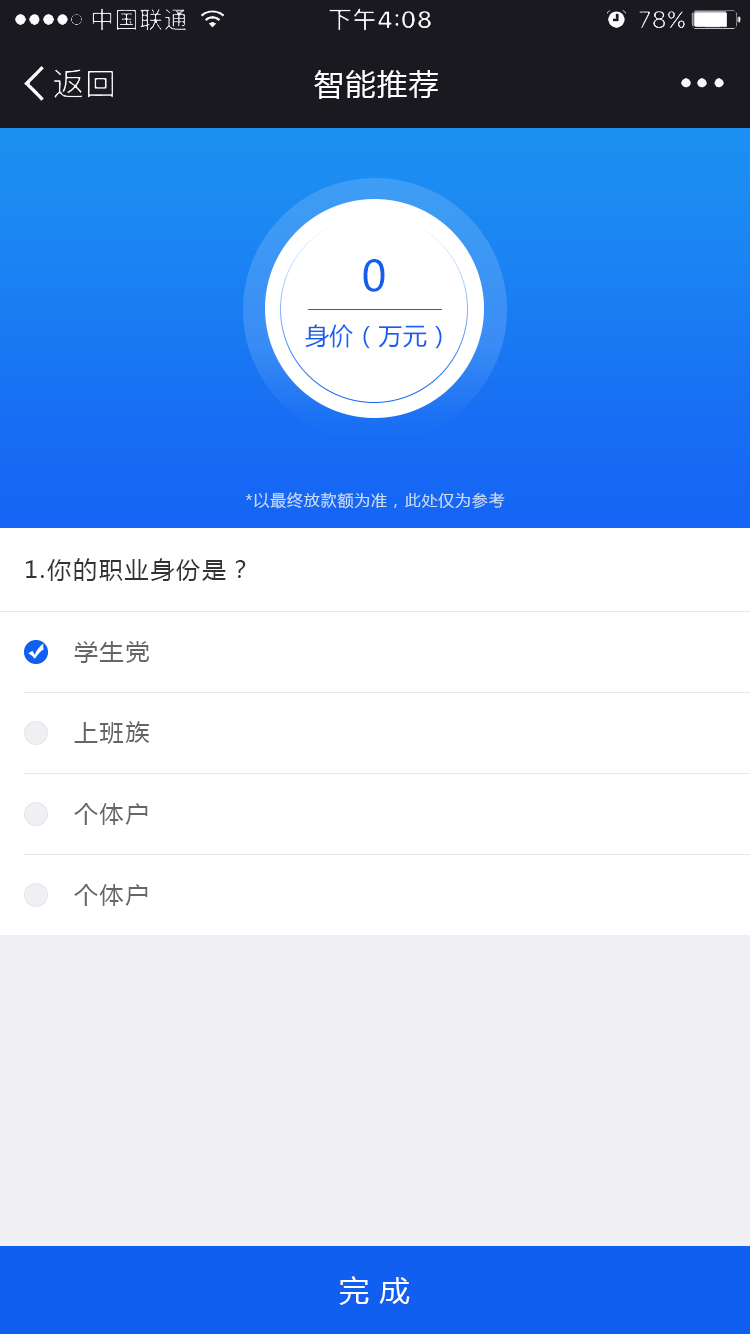
<style>
.page{position:relative;width:750px;height:1334px;background:#ffffff}
.page>*{position:absolute;margin:0}
.t1{font:30px "MicrosoftYaHei";letter-spacing:0.05em;color:#fffefe}
.t2{font:42px "MicrosoftYaHei";letter-spacing:0.06em;color:#105ff1}
.t3{font:24px "MicrosoftYaHei";letter-spacing:0.02em;color:#105ff1}
.t4{font:16px "MicrosoftYaHei";letter-spacing:0.05em;color:#c7ddf3}
.t5{font:24px "MicrosoftYaHei";letter-spacing:0.075em;color:#333333}
.t6{font:24px "MicrosoftYaHei";letter-spacing:0.075em;color:#666666}
.t7{font:30px "MicrosoftYaHei";letter-spacing:0.355em;color:#ffffff}
</style>
<div class="page">
<p class="t1" style="left:314px;top:70px;width:124px;height:29px">智能推荐</p>
<p class="t2" style="left:363px;top:259px;width:22px;height:33px">0</p>
<p class="t3" style="left:305px;top:324px;width:137px;height:25px">身价（万元）</p>
<p class="t4" style="left:246px;top:492px;width:259px;height:17px">*以最终放款额为准，此处仅为参考</p>
<p class="t5" style="left:26px;top:558px;width:220px;height:23px">1.你的职业身份是？</p>
<p class="t6" style="left:74px;top:641px;width:76px;height:22px">学生党</p>
<p class="t6" style="left:74px;top:721px;width:76px;height:23px">上班族</p>
<p class="t6" style="left:74px;top:803px;width:74px;height:22px">个体户</p>
<p class="t6" style="left:74px;top:884px;width:74px;height:22px">个体户</p>
<p class="t7" style="left:339px;top:1276px;width:71px;height:29px">完成</p>
</div>
